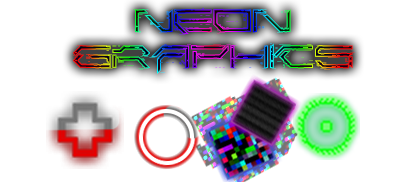
<style>
.page{position:relative;width:404px;height:182px;background:#ffffff}
.page>*{position:absolute;margin:0}
.t1{font:30px "Corruptor-LDR"}
</style>
<div class="page">
<p class="t1" style="left:73px;top:8px;width:282px;height:66px;text-align:center">Neon<br>GRAPHICS</p>
</div>
